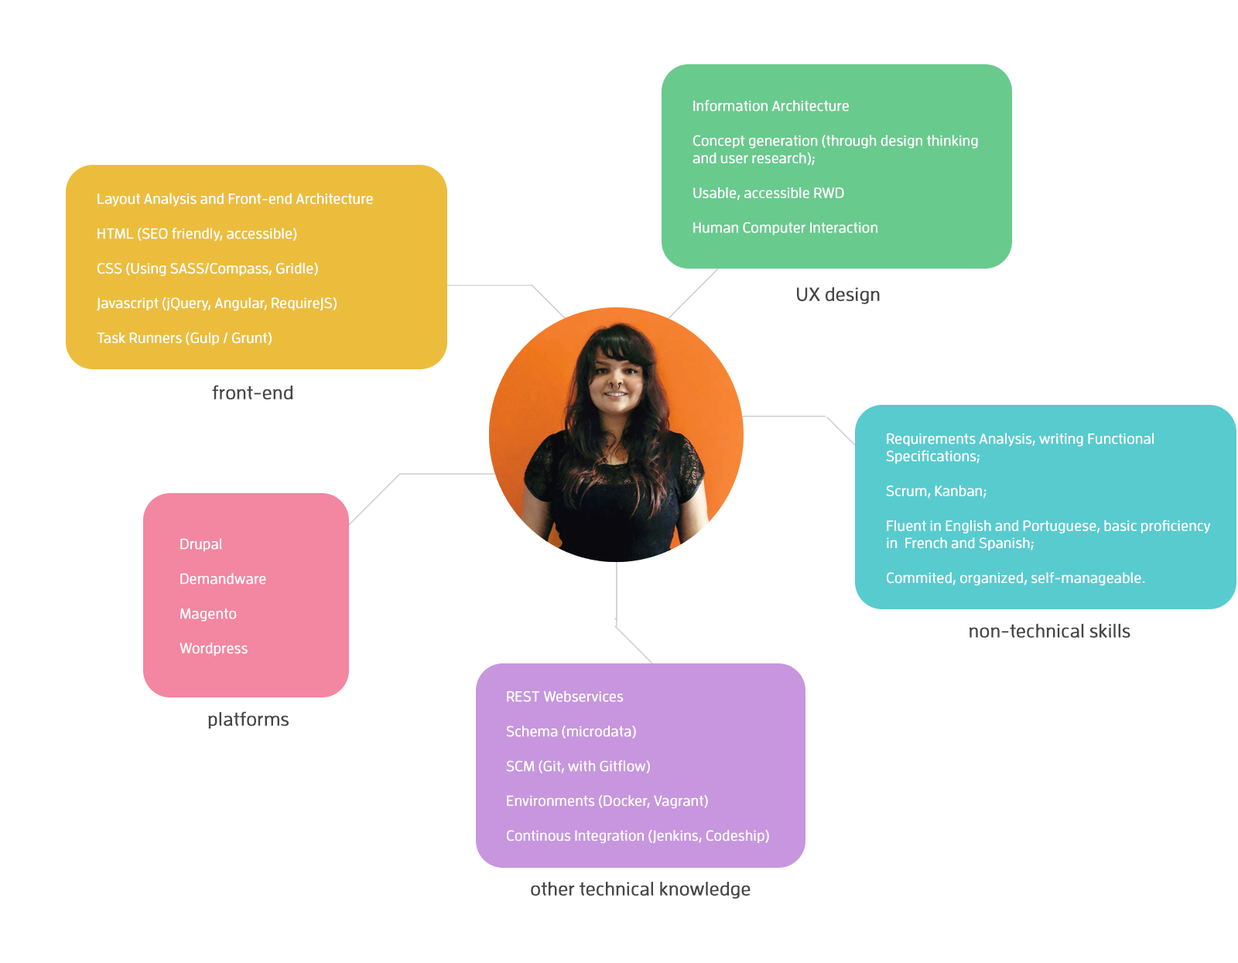
<style>
.page{position:relative;width:1238px;height:963px;background:#ffffff}
.page>*{position:absolute;margin:0}
.t1{font:14.5px "EnzoOT-Medi";color:#ffffff;font-weight:bold}
.t2{font:18.9px "EnzoOT-Medi";color:#474747;font-weight:bold}
</style>
<div class="page">
<p class="t1" style="left:693px;top:100px;width:285px;height:135px">Information Architecture<br><br>Concept generation (through design thinking <br>and user research);<br><br>Usable, accessible RWD <br><br>Human Computer Interaction</p>
<p class="t1" style="left:97px;top:193px;width:276px;height:152px">Layout Analysis and Front-end Architecture<br><br>HTML (SEO friendly, accessible)<br><br>CSS (Using SASS/Compass, Gridle)<br><br>Javascript (jQuery, Angular, RequireJS)<br><br>Task Runners (Gulp / Grunt)</p>
<p class="t2" style="left:797px;top:287px;width:83px;height:17px">UX design</p>
<p class="t2" style="left:212px;top:385px;width:81px;height:14px">front-end</p>
<p class="t1" style="left:886px;top:433px;width:325px;height:153px">Requirements Analysis, writing Functional <br>Specifications;<br><br>Scrum, Kanban;<br><br>Fluent in English and Portuguese, basic proficiency<br>in  French and Spanish;<br><br>Commited, organized, self-manageable.</p>
<p class="t1" style="left:180px;top:538px;width:86px;height:118px">Drupal<br><br>Demandware<br><br>Magento<br><br>Wordpress</p>
<p class="t2" style="left:969px;top:623px;width:162px;height:15px">non-technical skills</p>
<p class="t1" style="left:506px;top:690px;width:263px;height:154px">REST Webservices<br><br>Schema (microdata)<br><br>SCM (Git, with Gitflow)<br><br>Environments (Docker, Vagrant)<br><br>Continous Integration (Jenkins, Codeship)</p>
<p class="t2" style="left:208px;top:711px;width:81px;height:18px">platforms</p>
<p class="t2" style="left:531px;top:882px;width:220px;height:17px">other technical knowledge</p>
</div>
